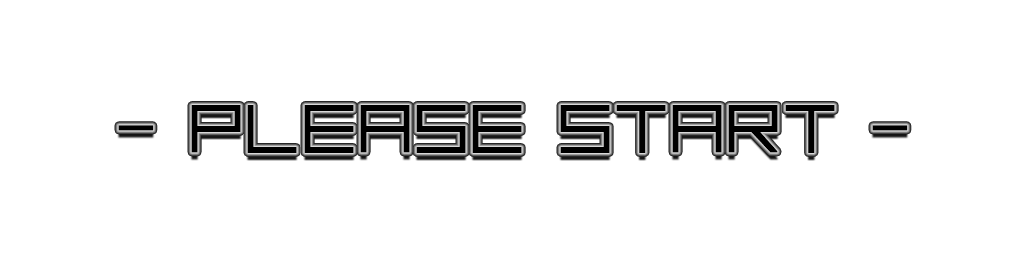
<style>
.page{position:relative;width:1024px;height:256px;background:#ffffff}
.page>*{position:absolute;margin:0}
.t1{font:60px "T.C.SYSTEM";color:#000000;font-weight:bold}
</style>
<div class="page">
<p class="t1" style="left:118px;top:105px;width:790px;height:48px">- PLEASE START -</p>
</div>
